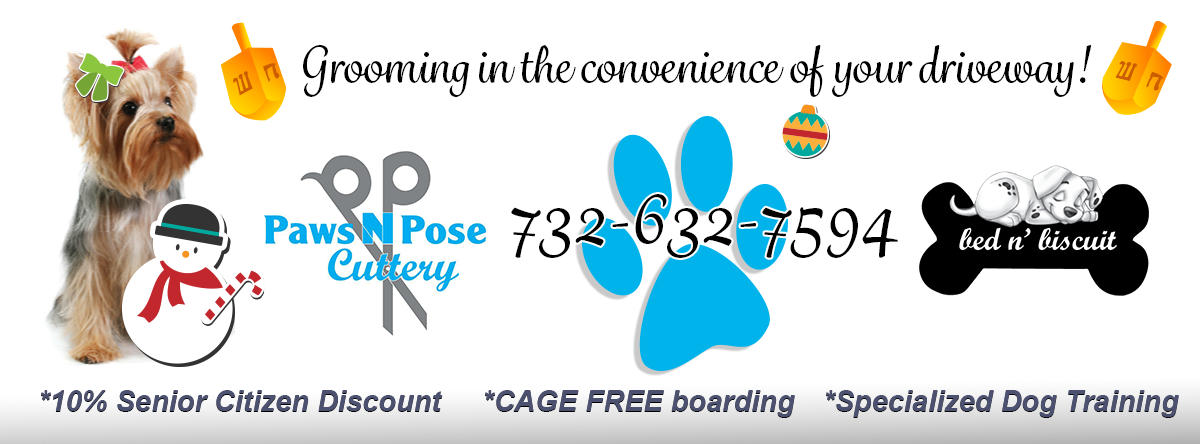
<style>
.page{position:relative;width:1200px;height:444px;background:#ffffff}
.page>*{position:absolute;margin:0}
.t1{font:48px "GrafolitaScript-Medium";color:#000000}
.t2{font:72px "GrafolitaScript-Medium";color:#000000}
.t3{font:29px "Arial-BoldItalicMT";color:#4d5170}
</style>
<div class="page">
<p class="t1" style="left:303px;top:45px;width:788px;height:52px">Grooming in the convenience of your driveway!</p>
<p class="t2" style="left:511px;top:194px;width:387px;height:64px">732-632-7594</p>
<p class="t3" style="left:41px;top:390px;width:402px;height:21px">*10% Senior Citizen Discount</p>
<p class="t3" style="left:485px;top:390px;width:310px;height:27px">*CAGE FREE boarding</p>
<p class="t3" style="left:826px;top:390px;width:353px;height:27px">*Specialized Dog Training</p>
<p class="t3" style="left:41px;top:391px;width:402px;height:21px">*10% Senior Citizen Discount</p>
<p class="t3" style="left:485px;top:391px;width:310px;height:27px">*CAGE FREE boarding</p>
<p class="t3" style="left:826px;top:391px;width:353px;height:27px">*Specialized Dog Training</p>
</div>
